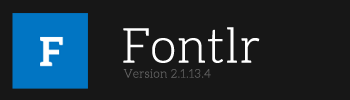
<style>
.page{position:relative;width:350px;height:100px;background:#171717}
.page>*{position:absolute;margin:0}
.t1{font:48px "Aleo-Light";color:#ffffff;font-weight:bold}
.t2{font:12px "Aleo-Light";color:#646464;font-weight:bold}
</style>
<div class="page">
<p class="t1" style="left:123px;top:27px;width:137px;height:36px">Fontlr</p>
<p class="t2" style="left:123px;top:69px;width:88px;height:9px">Version 2.1.13.4</p>
</div>
